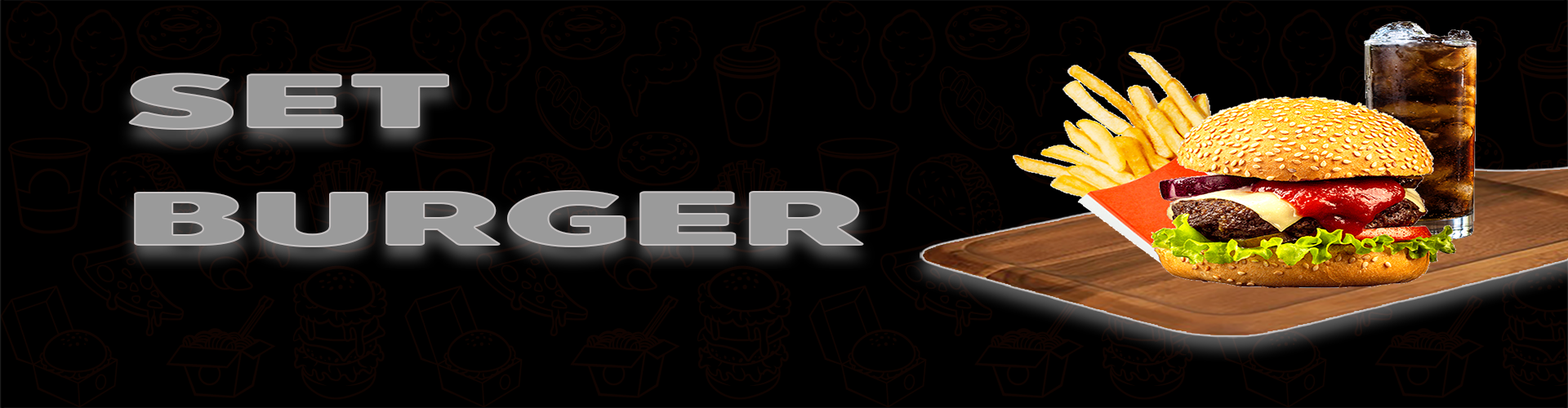
<style>
.page{position:relative;width:1568px;height:408px;background:#000000}
.page>*{position:absolute;margin:0}
.t1{font:77.4px "BoonTook-Mon-Ultra";color:#9a9a9a;scale:2.16 1}
</style>
<div class="page">
<p class="t1" style="left:128px;top:73px;width:321px;height:57px">SET</p>
<p class="t1" style="left:134px;top:190px;width:730px;height:57px">BURGER</p>
</div>
